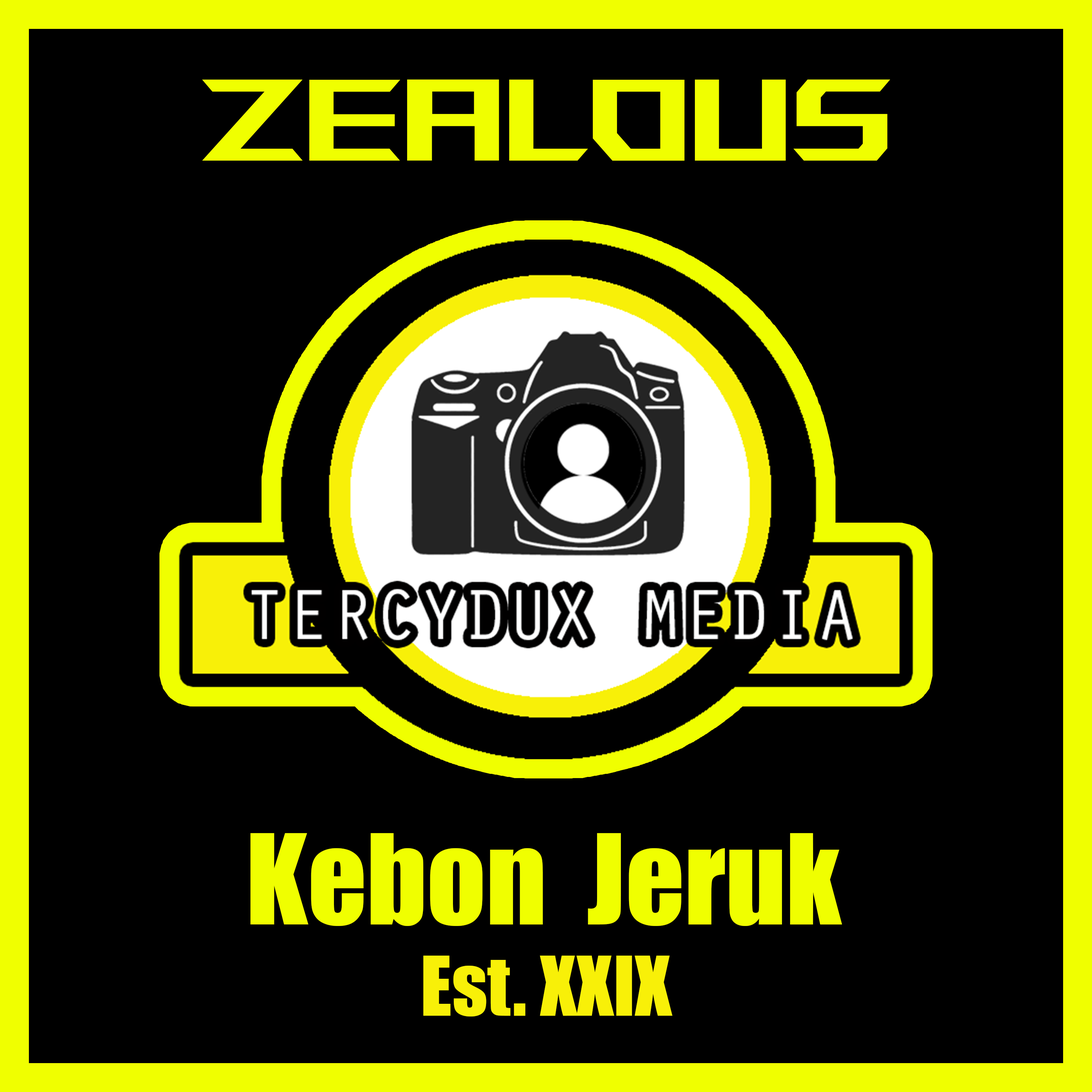
<style>
.page{position:relative;width:1092px;height:1092px;background:#000000}
.page>*{position:absolute;margin:0}
.t1{font:115.7px "ROGFonts-Regular";color:#f0ff00}
.t2{font:115.6px "Impact";color:#f0ff00}
.t3{font:75.7px "Impact";color:#f8f008}
</style>
<div class="page">
<p class="t1" style="left:202px;top:79px;width:688px;height:82px">Zealous</p>
<p class="t2" style="left:250px;top:833px;width:592px;height:93px">Kebon  Jeruk</p>
<p class="t3" style="left:423px;top:955px;width:250px;height:61px">Est. XXIX</p>
</div>
